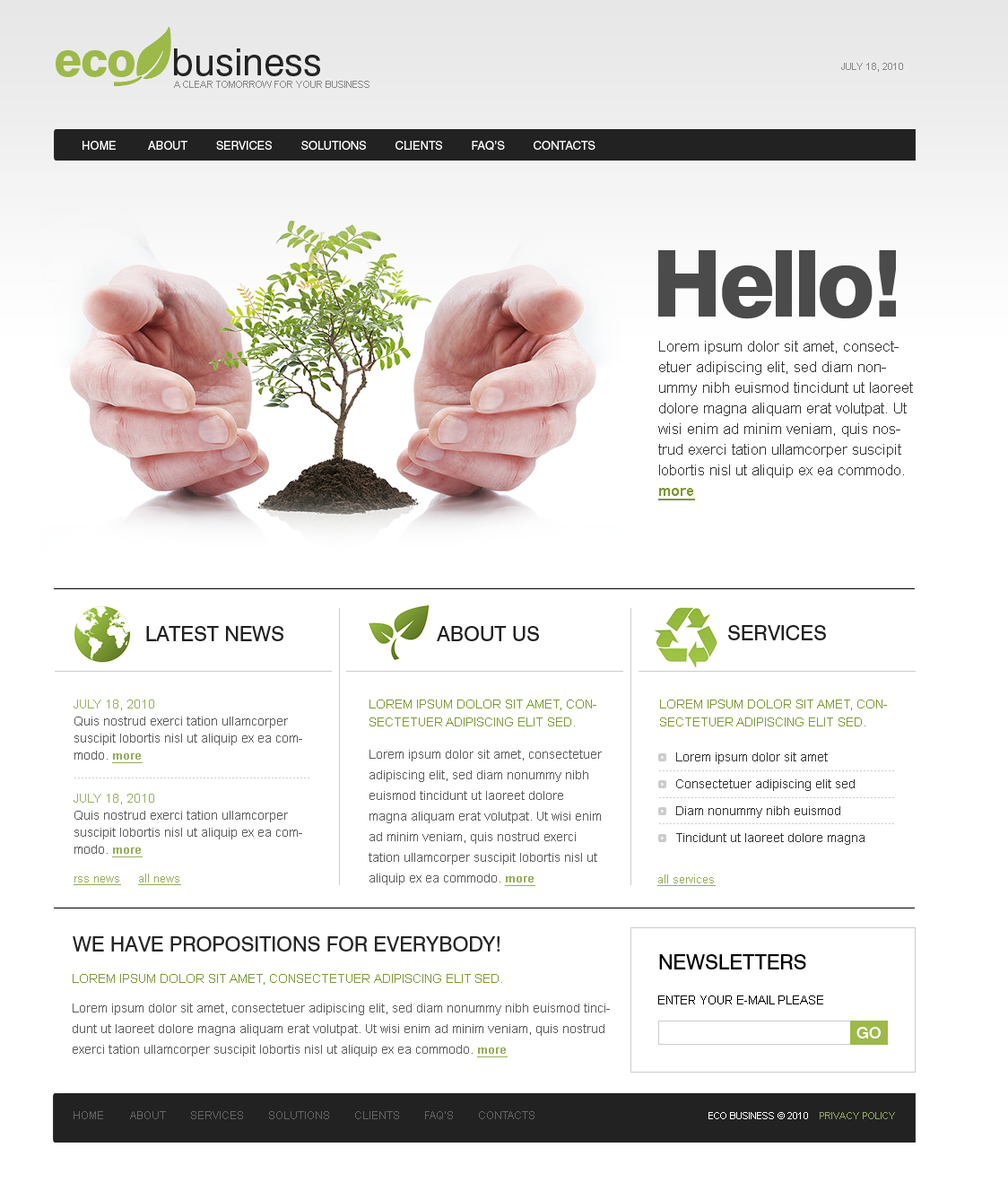
<style>
.page{position:relative;width:1008px;height:1182px;background:#ffffff}
.page>*{position:absolute;margin:0}
.t1{font:46.7px "Swiss721BT-Heavy";letter-spacing:-0.02em;color:#9db949}
.t2{font:37.7px "Swiss721BT-Roman";color:#222222}
.t3{font:9.9px "ArialMT";color:#868686;text-transform:uppercase}
.t4{font:11.7px "Swiss721BT-Roman";color:#ffffff;text-transform:uppercase}
.t5{font:92.4px "Swiss721BT-Heavy";letter-spacing:-0.04em;color:#4b4b4b}
.t6{font:15.3px/20.6px "ArialMT";color:#333333}
.t7{font:15.3px/20.6px "Arial-BoldMT";color:#7a9933;text-decoration:underline}
.t8{font:20.6px "Swiss721BT-Roman";color:#212121;text-transform:uppercase}
.t9{font:12.6px/17px "ArialMT";color:#5c5c5c}
.t10{font:12.6px/17.9px "ArialMT";color:#5c5c5c;text-transform:uppercase}
.t11{font:11.7px/17px "Arial-BoldMT";color:#5c5c5c;text-decoration:underline}
.t12{font:12.6px/17.9px "ArialMT";color:#7a9933;text-transform:uppercase}
.t13{font:12.6px/20.6px "ArialMT";color:#5c5c5c}
.t14{font:11.7px/20.6px "Arial-BoldMT";color:#5c5c5c;text-decoration:underline}
.t15{font:12.6px/26.9px "ArialMT";color:#333333}
.t16{font:11.7px "ArialMT";color:#95ad5c;text-decoration:underline}
.t17{font:20.6px "Swiss721BT-Roman";color:#262626;text-transform:uppercase}
.t18{font:20.6px "Swiss721BT-Roman";color:#000000;text-transform:uppercase}
.t19{font:12.6px "ArialMT";color:#7a9933;text-transform:uppercase}
.t20{font:11.7px "ArialMT";color:#000000;text-transform:uppercase}
.t21{font:16.1px "Swiss721BT-Medium";color:#ffffff;text-transform:uppercase}
.t22{font:10.8px "ArialMT";color:#656565;text-transform:uppercase}
.t23{font:9.9px "ArialMT";color:#ffffff;text-transform:uppercase}
.t24{font:9.9px "ArialMT";color:#95ad5c;text-transform:uppercase}
</style>
<div class="page">
<p class="t1" style="left:56px;top:50px;width:79px;height:27px">eco</p>
<p class="t2" style="left:174px;top:48px;width:146px;height:28px">business</p>
<p class="t3" style="left:842px;top:63px;width:61px;height:9px">JULY 18, 2010</p>
<p class="t3" style="left:174px;top:81px;width:196px;height:7px">A clear tomorrow for your business</p>
<p class="t4" style="left:83px;top:141px;width:513px;height:10px">Home          about         services         solutions         clients         faq’s         contacts</p>
<p class="t5" style="left:659px;top:250px;width:237px;height:69px">Hello!</p>
<p class="t6" style="left:659px;top:341px;width:254px;height:160px">Lorem ipsum dolor sit amet, consectetuer adipiscing elit, sed diam nonummy nibh euismod tincidunt ut laoreet dolore magna aliquam erat volutpat. Ut wisi enim ad minim veniam, quis nostrud exerci tation ullamcorper suscipit lobortis nisl ut aliquip ex ea commodo. <span class="t7">more</span></p>
<p class="t8" style="left:146px;top:626px;width:138px;height:15px">latest news</p>
<p class="t8" style="left:437px;top:626px;width:102px;height:15px">About us</p>
<p class="t8" style="left:729px;top:625px;width:97px;height:16px">Services</p>
<p class="t9" style="left:74px;top:700px;width:228px;height:63px"><span class="t10">JULY 18, 2010<br></span>Quis nostrud exerci tation ullamcorper suscipit lobortis nisl ut aliquip ex ea commodo. <span class="t11">more</span></p>
<p class="t12" style="left:370px;top:700px;width:227px;height:27px">Lorem ipsum dolor sit amet, consectetuer adipiscing elit sed.</p>
<p class="t12" style="left:660px;top:700px;width:227px;height:27px">Lorem ipsum dolor sit amet, consectetuer adipiscing elit sed.</p>
<p class="t13" style="left:369px;top:750px;width:233px;height:136px">Lorem ipsum dolor sit amet, consectetuer adipiscing elit, sed diam nonummy nibh euismod tincidunt ut laoreet dolore magna aliquam erat volutpat. Ut wisi enim ad minim veniam, quis nostrud exerci tation ullamcorper suscipit lobortis nisl ut aliquip ex ea commodo. <span class="t14">more</span></p>
<p class="t15" style="left:676px;top:753px;width:189px;height:92px">Lorem ipsum dolor sit amet<br>Consectetuer adipiscing elit sed <br>Diam nonummy nibh euismod <br>Tincidunt ut laoreet dolore magna</p>
<p class="t9" style="left:74px;top:794px;width:228px;height:64px"><span class="t10">JULY 18, 2010<br></span>Quis nostrud exerci tation ullamcorper suscipit lobortis nisl ut aliquip ex ea commodo. <span class="t11">more</span></p>
<p class="t16" style="left:74px;top:877px;width:47px;height:9px">rss news</p>
<p class="t16" style="left:138px;top:874px;width:43px;height:12px">all news</p>
<p class="t16" style="left:658px;top:875px;width:58px;height:11px">all services</p>
<p class="t17" style="left:73px;top:937px;width:427px;height:15px">We have propositions for everybody!</p>
<p class="t18" style="left:659px;top:955px;width:148px;height:15px">Newsletters</p>
<p class="t19" style="left:73px;top:974px;width:429px;height:11px">Lorem ipsum dolor sit amet, consectetuer adipiscing elit sed.</p>
<p class="t20" style="left:659px;top:996px;width:165px;height:9px">Enter your e-mail please</p>
<p class="t13" style="left:73px;top:1004px;width:537px;height:54px">Lorem ipsum dolor sit amet, consectetuer adipiscing elit, sed diam nonummy nibh euismod tincidunt ut laoreet dolore magna aliquam erat volutpat. Ut wisi enim ad minim veniam, quis nostrud exerci tation ullamcorper suscipit lobortis nisl ut aliquip ex ea commodo. <span class="t14">more</span></p>
<p class="t21" style="left:857px;top:1027px;width:24px;height:12px">Go</p>
<p class="t22" style="left:74px;top:1112px;width:461px;height:8px">Home          about         services         solutions         clients         faq’s         contacts</p>
<p class="t23" style="left:709px;top:1112px;width:186px;height:8px">eco Business © 2010    <span class="t24">Privacy Policy</span></p>
</div>
